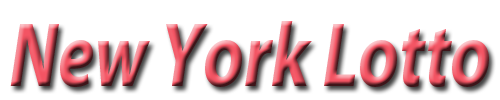
<style>
.page{position:relative;width:500px;height:100px;background:#ffffff}
.page>*{position:absolute;margin:0}
.t1{font:92px "MyriadPro-BoldIt";scale:0.79 1}
</style>
<div class="page">
<p class="t1" style="left:10px;top:21px;width:479px;height:66px">New York Lotto</p>
</div>
